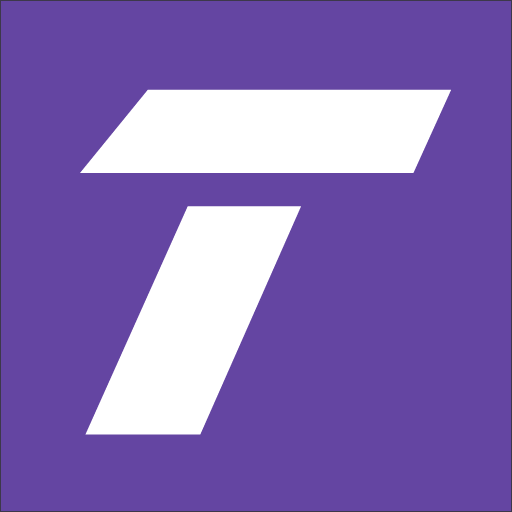
<style>
.page{position:relative;width:512px;height:512px;background:#6445a2}
.page>*{position:absolute;margin:0}
.t1{font:500.1px "BladeRunnerMovieFont";color:#ffffff;font-style:italic}
</style>
<div class="page">
<p class="t1" style="left:80px;top:89px;width:371px;height:346px">T</p>
</div>
